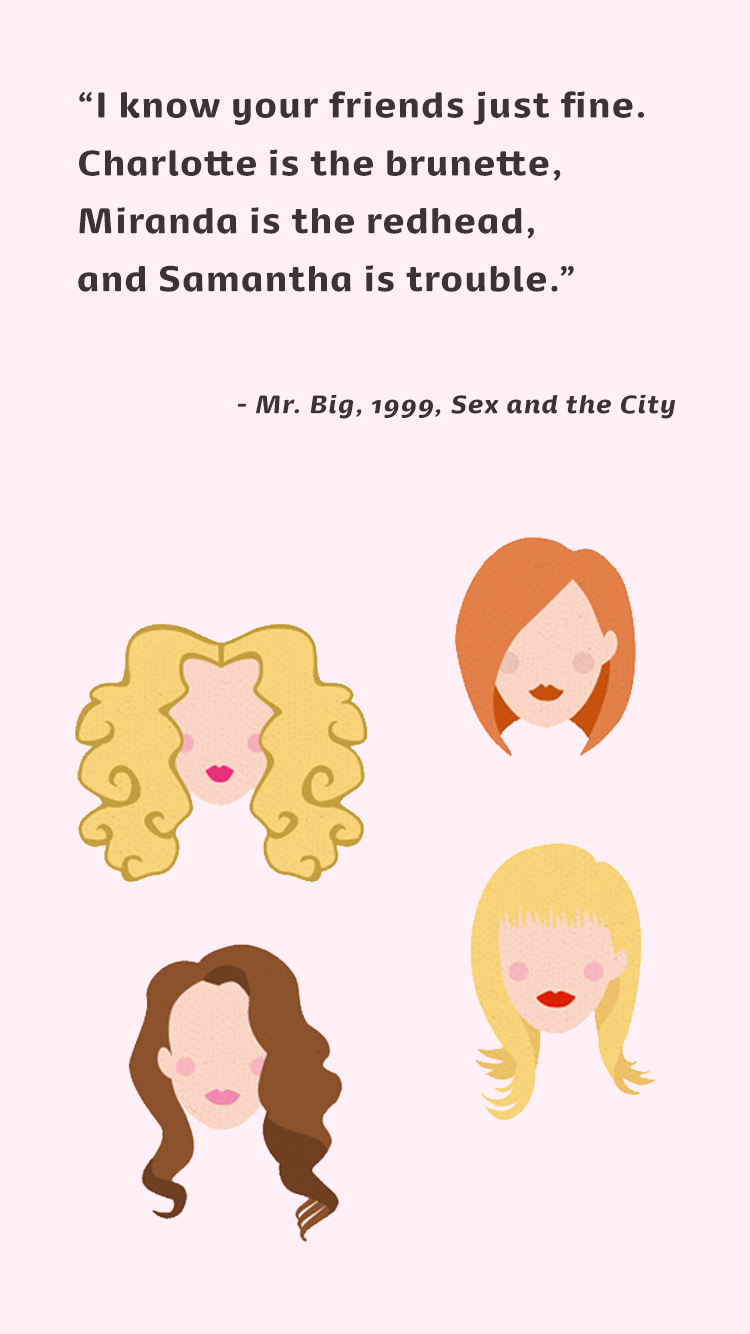
<style>
.page{position:relative;width:750px;height:1334px;background:#fff0f7}
.page>*{position:absolute;margin:0}
.t1{font:34px/57.9px "DancerProBlack";letter-spacing:0.04em;color:#3d3334}
.t2{font:24.2px "DancerProBlack-Italic";letter-spacing:0.04em;color:#3d3334}
</style>
<div class="page">
<p class="t1" style="left:78px;top:91px;width:566px;height:201px">“I know your friends just fine. <br>Charlotte is the brunette, <br>Miranda is the redhead, <br>and Samantha is trouble.”</p>
<p class="t2" style="left:237px;top:394px;width:438px;height:25px">- Mr. Big, 1999, Sex and the City</p>
</div>
